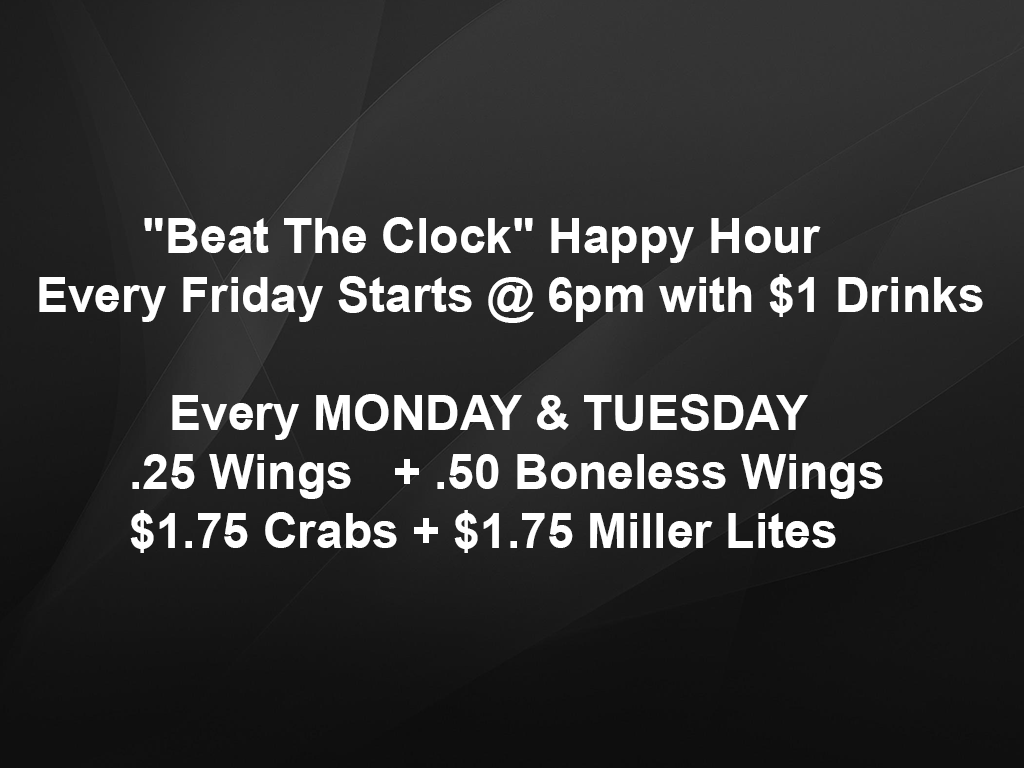
<style>
.page{position:relative;width:1024px;height:768px}
.page>*{position:absolute;margin:0}
.t1{font:49.3px "Arial-BoldMT";color:#ffffff}
</style>
<div class="page">
<p class="t1" style="left:39px;top:217px;width:944px;height:336px">"Beat The Clock" Happy Hour <br>Every Friday Starts @ 6pm with $1 Drinks<br><br>          Every MONDAY &amp; TUESDAY<br>       .25 Wings   + .50 Boneless Wings <br>       $1.75 Crabs + $1.75 Miller Lites</p>
</div>
